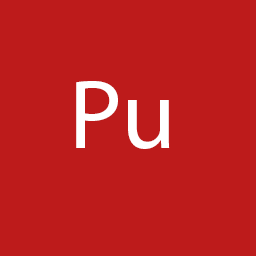
<style>
.page{position:relative;width:256px;height:256px;background:#bd1b1b}
.page>*{position:absolute;margin:0}
.t1{font:100px "MyriadPro-Regular";color:#ffffff}
</style>
<div class="page">
<p class="t1" style="left:76px;top:81px;width:94px;height:68px">Pu</p>
</div>
